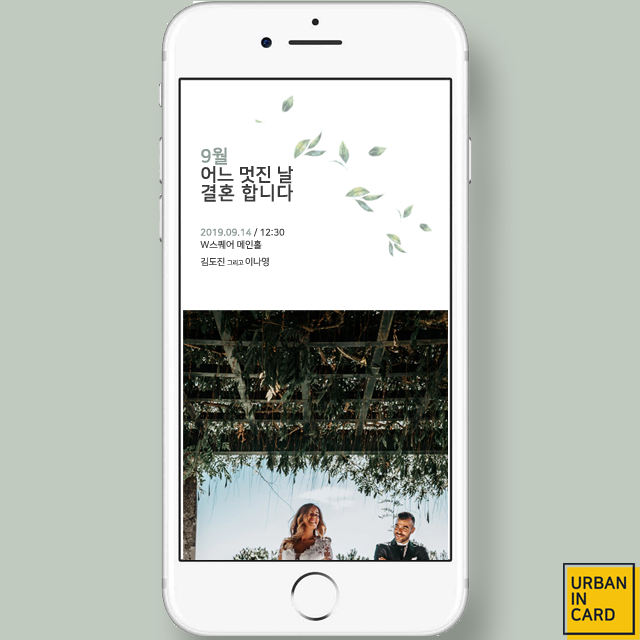
<style>
.page{position:relative;width:640px;height:640px;background:#c1cabf}
.page>*{position:absolute;margin:0}
.t1{font:18.4px "NanumSquareB";color:#3a3a3a}
.t2{font:18.4px "NanumSquareB";color:#8c9c95}
.t3{font:18.4px "NanumSquareB";letter-spacing:0.049em;color:#3a3a3a}
.t4{font:9.2px/12.4px "NanumSquareR";color:#3a3a3a}
.t5{font:9.2px/12.4px "NanumSquareR";color:#8c9c95;font-weight:bold}
.t6{font:9.2px/17px "NanumSquareR";letter-spacing:-0.02em;color:#3a3a3a}
.t7{font:6.1px/17px "NanumSquareR";letter-spacing:-0.02em;color:#3a3a3a}
</style>
<div class="page">
<p class="t1" style="left:201px;top:147px;width:92px;height:55px"><span class="t2">9월<br></span>어느 멋진 날<br><span class="t3">결혼 합니다</span></p>
<p class="t4" style="left:200px;top:228px;width:85px;height:39px"><span class="t5">2019.09.14</span> / 12:30<br>W스퀘어 메인홀<br><span class="t6">김도진 </span><span class="t7">그리고 </span><span class="t6">이나영</span></p>
</div>
